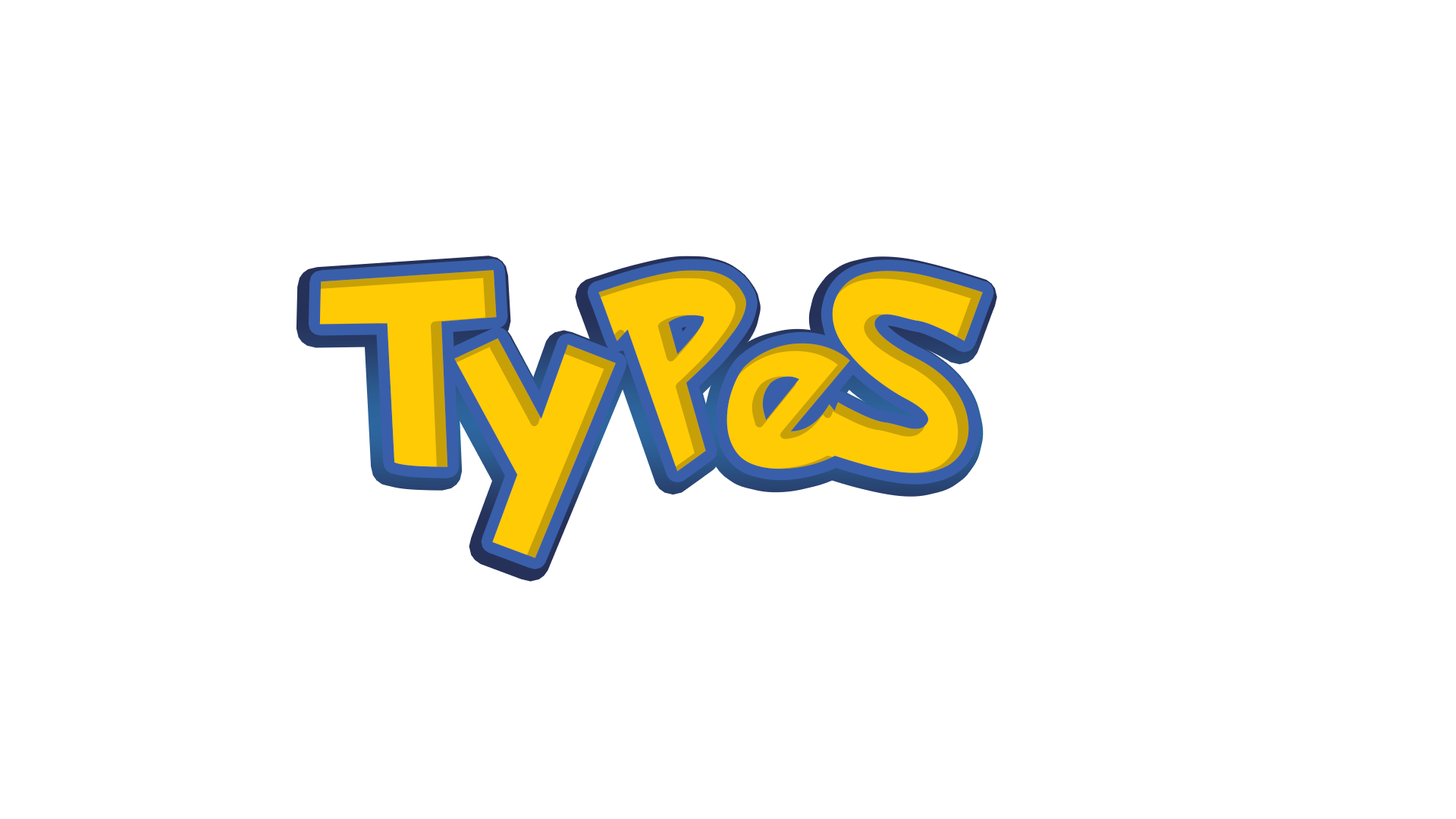
<style>
.page{position:relative;width:1456px;height:819px;background:#ffffff}
.page>*{position:absolute;margin:0}
.t1{font:221.2px "PokemonSolidNormal";letter-spacing:0.002em;color:#ffcb05}
</style>
<div class="page">
<p class="t1" style="left:319px;top:270px;width:664px;height:288px">TyPeS</p>
<p class="t1" style="left:315px;top:275px;width:663px;height:288px">TyPeS</p>
</div>
